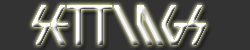
<style>
.page{position:relative;width:250px;height:50px;background:#333333}
.page>*{position:absolute;margin:0}
.t1{font:48px "exoziti";font-weight:bold}
</style>
<div class="page">
<p class="t1" style="left:32px;top:5px;width:174px;height:40px">SETTINGS</p>
</div>
